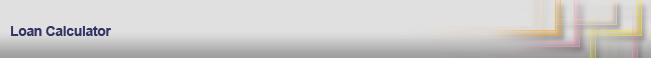
<style>
.page{position:relative;width:651px;height:58px;background:#e1e0e0}
.page>*{position:absolute;margin:0}
.t1{font:14px "Arial-BoldMT";letter-spacing:-0.025em;color:#333366}
</style>
<div class="page">
<p class="t1" style="left:11px;top:26px;width:100px;height:10px">Loan Calculator</p>
</div>
